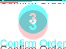
<style>
.page{position:relative;width:66px;height:49px;background:#ffffff}
.page>*{position:absolute;margin:0}
.t1{font:15.3px "Arial-BoldMT"}
.t2{font:10.4px "ArialMT";color:#33ffff}
</style>
<div class="page">
<p class="t1" style="left:29px;top:12px;width:8px;height:11px">3</p>
<p class="t2" style="left:0px;top:38px;width:66px;height:8px">Confirm Order</p>
</div>
